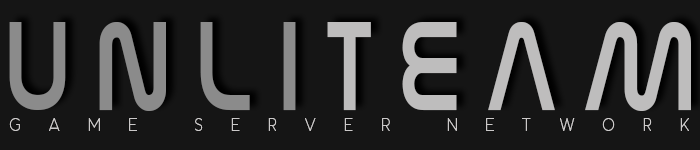
<style>
.page{position:relative;width:700px;height:150px;background:#151515}
.page>*{position:absolute;margin:0}
.t1{font:140px "NasalizationFree";letter-spacing:0.25em;color:#8b8b8b;scale:0.75 1}
.t2{font:140px "NasalizationFree";letter-spacing:0.25em;color:#bebdbd;scale:0.75 1}
.t3{font:17.2px "AukimLight";letter-spacing:2em;color:#cbc9c9;scale:0.83 1}
</style>
<div class="page">
<p class="t1" style="left:9px;top:22px;width:682px;height:89px">UNLI<span class="t2">TEAM</span></p>
<p class="t3" style="left:9px;top:118px;width:680px;height:13px">GAME SERVER NETWORK</p>
</div>
